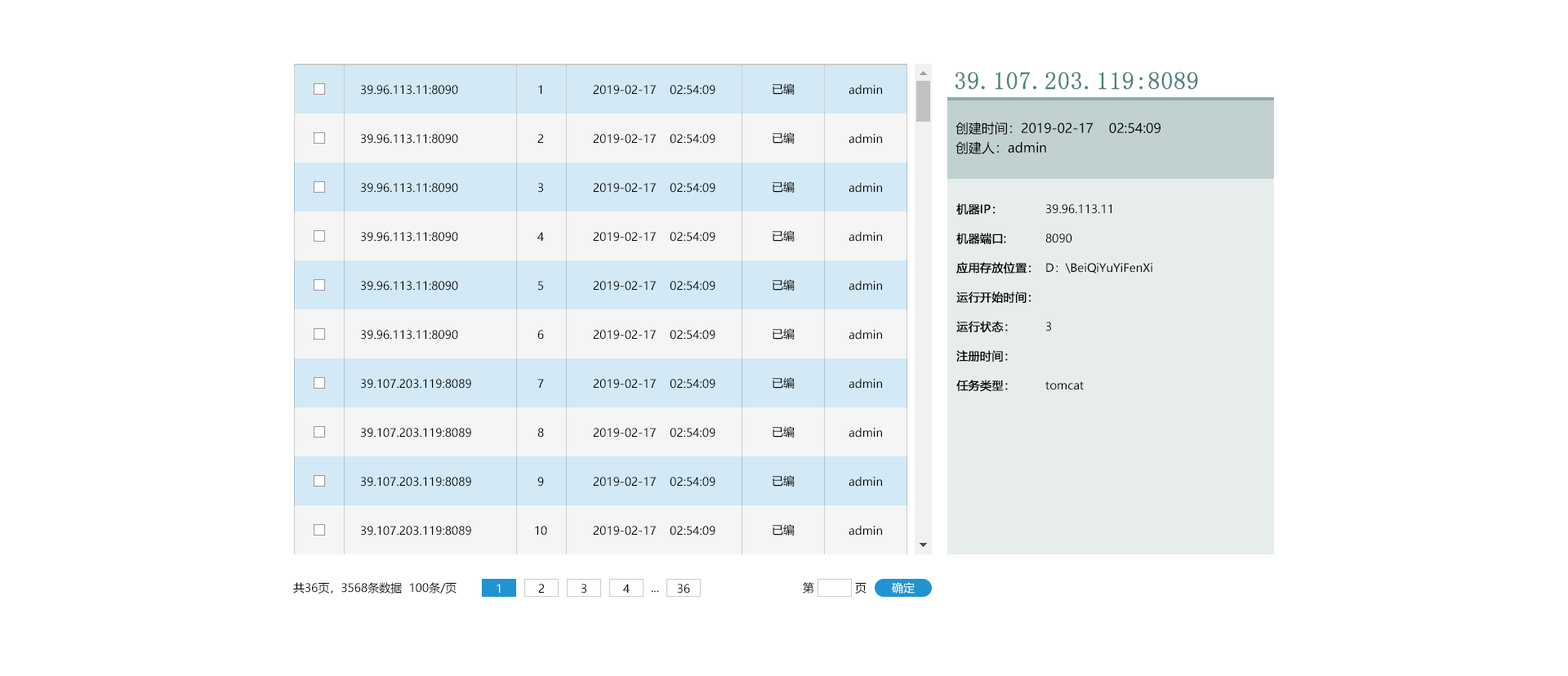
<style>
.page{position:relative;width:1568px;height:676px;background:#ffffff}
.page>*{position:absolute;margin:0}
.t1{font:24.5px "NSimSun";color:#4f817f;font-weight:bold}
.t2{font:11.4px "MicrosoftYaHei";color:#000000}
.t3{font:13.1px/19.6px "MicrosoftYaHei";color:#000000}
.t4{font:11.4px/29.4px "MicrosoftYaHei";color:#000000;font-weight:bold}
.t5{font:11.4px/29.4px "MicrosoftYaHei";color:#000000}
.t6{font:11.4px "MicrosoftYaHei";color:#fffefe}
.t7{font:11.4px "MicrosoftYaHei";color:#ffffff}
</style>
<div class="page">
<p class="t1" style="left:956px;top:72px;width:242px;height:18px">39.107.203.119:8089</p>
<p class="t2" style="left:361px;top:85px;width:97px;height:10px">39.96.113.11:8090</p>
<p class="t2" style="left:538px;top:85px;width:4px;height:9px">1</p>
<p class="t2" style="left:593px;top:85px;width:122px;height:10px">2019-02-17    02:54:09</p>
<p class="t2" style="left:773px;top:83px;width:22px;height:12px">已编</p>
<p class="t2" style="left:849px;top:84px;width:33px;height:11px">admin</p>
<p class="t3" style="left:956px;top:122px;width:204px;height:32px">创建时间：2019-02-17    02:54:09<br>创建人：admin</p>
<p class="t2" style="left:361px;top:134px;width:97px;height:10px">39.96.113.11:8090</p>
<p class="t2" style="left:537px;top:134px;width:7px;height:9px">2</p>
<p class="t2" style="left:593px;top:134px;width:122px;height:10px">2019-02-17    02:54:09</p>
<p class="t2" style="left:773px;top:132px;width:22px;height:12px">已编</p>
<p class="t2" style="left:849px;top:133px;width:33px;height:11px">admin</p>
<p class="t2" style="left:361px;top:183px;width:97px;height:10px">39.96.113.11:8090</p>
<p class="t2" style="left:538px;top:183px;width:5px;height:10px">3</p>
<p class="t2" style="left:593px;top:183px;width:122px;height:10px">2019-02-17    02:54:09</p>
<p class="t2" style="left:773px;top:181px;width:22px;height:12px">已编</p>
<p class="t2" style="left:849px;top:182px;width:33px;height:11px">admin</p>
<p class="t4" style="left:956px;top:203px;width:75px;height:189px">机器IP： <br>机器端口:<br>应用存放位置：<br>运行开始时间： <br>运行状态：<br>注册时间：<br>任务类型：</p>
<p class="t5" style="left:1045px;top:204px;width:107px;height:186px">39.96.113.11<br>8090<br>D：\BeiQiYuYiFenXi<br><br>3<br><br>tomcat</p>
<p class="t2" style="left:361px;top:232px;width:97px;height:10px">39.96.113.11:8090</p>
<p class="t2" style="left:537px;top:232px;width:7px;height:9px">4</p>
<p class="t2" style="left:593px;top:232px;width:122px;height:10px">2019-02-17    02:54:09</p>
<p class="t2" style="left:773px;top:230px;width:22px;height:12px">已编</p>
<p class="t2" style="left:849px;top:231px;width:33px;height:11px">admin</p>
<p class="t2" style="left:361px;top:281px;width:97px;height:10px">39.96.113.11:8090</p>
<p class="t2" style="left:538px;top:281px;width:5px;height:10px">5</p>
<p class="t2" style="left:593px;top:281px;width:122px;height:10px">2019-02-17    02:54:09</p>
<p class="t2" style="left:773px;top:279px;width:22px;height:12px">已编</p>
<p class="t2" style="left:849px;top:280px;width:33px;height:11px">admin</p>
<p class="t2" style="left:361px;top:330px;width:97px;height:10px">39.96.113.11:8090</p>
<p class="t2" style="left:537px;top:330px;width:7px;height:10px">6</p>
<p class="t2" style="left:593px;top:330px;width:122px;height:10px">2019-02-17    02:54:09</p>
<p class="t2" style="left:773px;top:328px;width:22px;height:12px">已编</p>
<p class="t2" style="left:849px;top:329px;width:33px;height:11px">admin</p>
<p class="t2" style="left:773px;top:377px;width:22px;height:12px">已编</p>
<p class="t2" style="left:361px;top:379px;width:110px;height:10px">39.107.203.119:8089</p>
<p class="t2" style="left:537px;top:379px;width:7px;height:9px">7</p>
<p class="t2" style="left:593px;top:379px;width:122px;height:10px">2019-02-17    02:54:09</p>
<p class="t2" style="left:849px;top:378px;width:33px;height:11px">admin</p>
<p class="t2" style="left:361px;top:428px;width:110px;height:10px">39.107.203.119:8089</p>
<p class="t2" style="left:537px;top:428px;width:7px;height:10px">8</p>
<p class="t2" style="left:593px;top:428px;width:122px;height:10px">2019-02-17    02:54:09</p>
<p class="t2" style="left:773px;top:426px;width:22px;height:12px">已编</p>
<p class="t2" style="left:849px;top:427px;width:33px;height:11px">admin</p>
<p class="t2" style="left:361px;top:477px;width:110px;height:10px">39.107.203.119:8089</p>
<p class="t2" style="left:537px;top:477px;width:7px;height:10px">9</p>
<p class="t2" style="left:593px;top:477px;width:122px;height:10px">2019-02-17    02:54:09</p>
<p class="t2" style="left:773px;top:475px;width:22px;height:12px">已编</p>
<p class="t2" style="left:849px;top:476px;width:33px;height:11px">admin</p>
<p class="t2" style="left:361px;top:526px;width:110px;height:10px">39.107.203.119:8089</p>
<p class="t2" style="left:535px;top:526px;width:12px;height:10px">10</p>
<p class="t2" style="left:593px;top:526px;width:122px;height:10px">2019-02-17    02:54:09</p>
<p class="t2" style="left:773px;top:524px;width:22px;height:12px">已编</p>
<p class="t2" style="left:849px;top:525px;width:33px;height:11px">admin</p>
<p class="t2" style="left:293px;top:582px;width:164px;height:12px">共36页，3568条数据  100条/页</p>
<p class="t6" style="left:497px;top:584px;width:4px;height:9px">1</p>
<p class="t2" style="left:538px;top:584px;width:7px;height:9px">2</p>
<p class="t2" style="left:581px;top:584px;width:5px;height:10px">3</p>
<p class="t2" style="left:623px;top:584px;width:7px;height:9px">4</p>
<p class="t2" style="left:651px;top:590px;width:8px;height:3px">...</p>
<p class="t2" style="left:677px;top:584px;width:13px;height:10px">36</p>
<p class="t2" style="left:803px;top:582px;width:11px;height:12px">第</p>
<p class="t2" style="left:855px;top:583px;width:11px;height:11px">页</p>
<p class="t7" style="left:892px;top:582px;width:23px;height:12px">确定</p>
</div>
